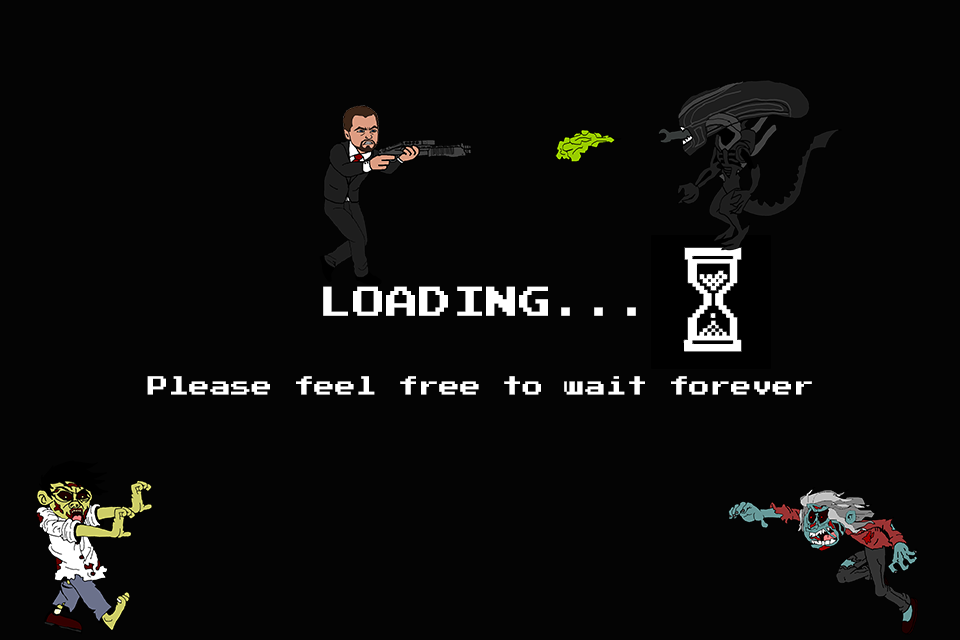
<style>
.page{position:relative;width:960px;height:640px;background:#040404}
.page>*{position:absolute;margin:0}
.t1{font:33.3px "PressStart2P";color:#ffffff}
.t2{font:20.8px "PressStart2P";color:#ffffff}
</style>
<div class="page">
<p class="t1" style="left:323px;top:286px;width:313px;height:30px">LOADING...</p>
<p class="t2" style="left:147px;top:376px;width:665px;height:19px">Please feel free to wait forever</p>
</div>
